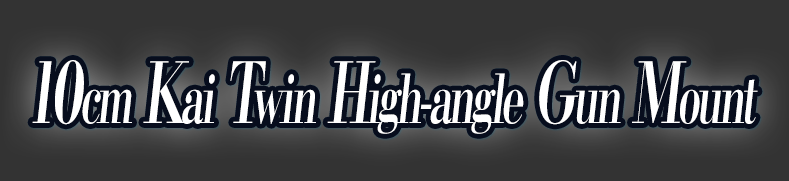
<style>
.page{position:relative;width:789px;height:181px;background:#333333}
.page>*{position:absolute;margin:0}
.t1{font:67.2px "KochoStd-Heavy";letter-spacing:-0.08em;color:#ffffff;font-style:italic;scale:0.62 1}
.t2{font:84px "KochoStd-Heavy";letter-spacing:-0.08em;color:#ffffff;font-style:italic;scale:0.62 1}
</style>
<div class="page">
<p class="t1" style="left:32px;top:60px;width:726px;height:74px"><span class="t2">10</span>cm<span class="t2"> K</span>ai<span class="t2"> T</span>win<span class="t2"> H</span>igh-angle<span class="t2"> G</span>un<span class="t2"> M</span>ount</p>
</div>
